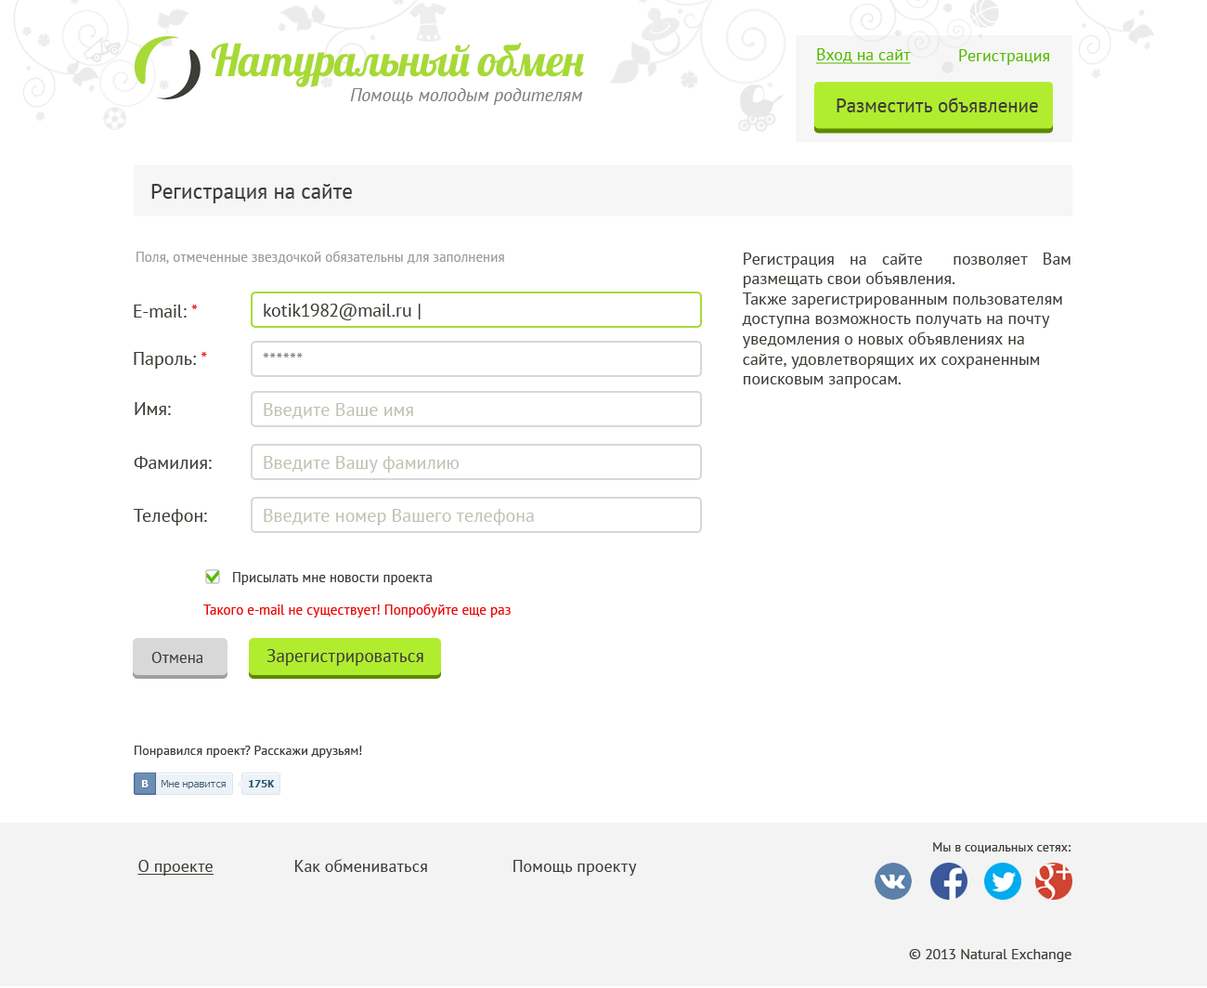
<style>
.page{position:relative;width:1207px;height:988px;background:#ffffff}
.page>*{position:absolute;margin:0}
.t1{font:44px "Lobster";letter-spacing:-0.08em;color:#a6d937}
.t2{font:16.7px "PTSans-Regular";color:#53ba00;text-decoration:underline}
.t3{font:16.7px "PTSans-Regular";color:#53ba00}
.t4{font:18.6px "PTSans-Italic";color:#7f7f7f}
.t5{font:19.5px "PTSans-Regular";color:#3e3e38}
.t6{font:21.4px "PTSans-Regular";color:#3e3e38}
.t7{font:13.9px "PTSans-Regular";color:#9c9c9c}
.t8{font:16.7px "PTSans-Regular";color:#3e3e38}
.t9{font:18.6px "PTSans-Regular";color:#3e3e38}
.t10{font:18.6px "PTSans-Regular";color:#e91a1a}
.t11{font:18.6px "PTSans-Regular";color:#84847c}
.t12{font:18.6px "PTSans-Regular";color:#c1c1b4}
.t13{font:13.9px "PTSans-Regular";color:#3e3e38}
.t14{font:13.9px "PTSans-Regular";color:#e90505}
.t15{font:15.8px "PTSans-Regular";color:#3e3e38}
.t16{font:17.6px "PTSans-Regular";color:#3e3e38}
.t17{font:13px "PTSans-Regular";color:#3e3e38}
.t18{font:16.7px "PTSans-Regular";color:#3e3e38;text-decoration:underline}
.t19{font:14.9px "PTSans-Regular";color:#3e3e38}
</style>
<div class="page">
<p class="t1" style="left:211px;top:43px;width:373px;height:44px">Натуральный  обмен</p>
<p class="t2" style="left:816px;top:48px;width:95px;height:16px">Вход на сайт</p>
<p class="t3" style="left:959px;top:49px;width:90px;height:16px">Регистрация</p>
<p class="t4" style="left:350px;top:88px;width:233px;height:17px">Помощь молодым родителям</p>
<p class="t5" style="left:837px;top:97px;width:201px;height:15px">Разместить объявление</p>
<p class="t6" style="left:151px;top:184px;width:201px;height:19px">Регистрация на сайте</p>
<p class="t7" style="left:136px;top:251px;width:368px;height:13px">Поля, отмеченные звездочкой обязательны для заполнения</p>
<p class="t8" style="left:742px;top:253px;width:329px;height:135px;text-align:justify">Регистрация на сайте  позволяет Вам размещать свои объявления.<br>Также зарегистрированным пользователям доступна возможность получать на почту уведомления о новых объявлениях на сайте, удовлетворящих их сохраненным поисковым запросам.</p>
<p class="t9" style="left:134px;top:305px;width:64px;height:13px">E-mail: <span class="t10">*</span></p>
<p class="t9" style="left:264px;top:304px;width:157px;height:16px">kotik1982@mail.ru |</p>
<p class="t9" style="left:134px;top:352px;width:73px;height:17px">Пароль: <span class="t10">*</span></p>
<p class="t11" style="left:263px;top:353px;width:40px;height:4px">******</p>
<p class="t9" style="left:135px;top:402px;width:36px;height:13px">Имя:</p>
<p class="t12" style="left:264px;top:403px;width:149px;height:16px">Введите Ваше имя</p>
<p class="t9" style="left:134px;top:456px;width:78px;height:13px">Фамилия:</p>
<p class="t12" style="left:264px;top:456px;width:195px;height:17px">Введите Вашу фамилию</p>
<p class="t9" style="left:133px;top:509px;width:74px;height:17px">Телефон:</p>
<p class="t12" style="left:264px;top:509px;width:270px;height:17px">Введите номер Вашего телефона</p>
<p class="t13" style="left:233px;top:572px;width:200px;height:13px">Присылать мне новости проекта</p>
<p class="t14" style="left:203px;top:604px;width:308px;height:13px">Такого e-mail не существует! Попробуйте еще раз</p>
<p class="t15" style="left:151px;top:652px;width:52px;height:11px">Отмена</p>
<p class="t16" style="left:266px;top:649px;width:157px;height:17px">Зарегистрироваться</p>
<p class="t17" style="left:135px;top:746px;width:227px;height:12px">Понравился проект? Расскажи друзьям!</p>
<p class="t17" style="left:933px;top:842px;width:138px;height:11px">Мы в социальных сетях:</p>
<p class="t8" style="left:137px;top:859px;width:500px;height:17px"><span class="t18">О проекте</span>       Как обмениваться            Помощь  проекту</p>
<p class="t19" style="left:909px;top:949px;width:162px;height:13px">© 2013 Natural Exchange</p>
</div>
